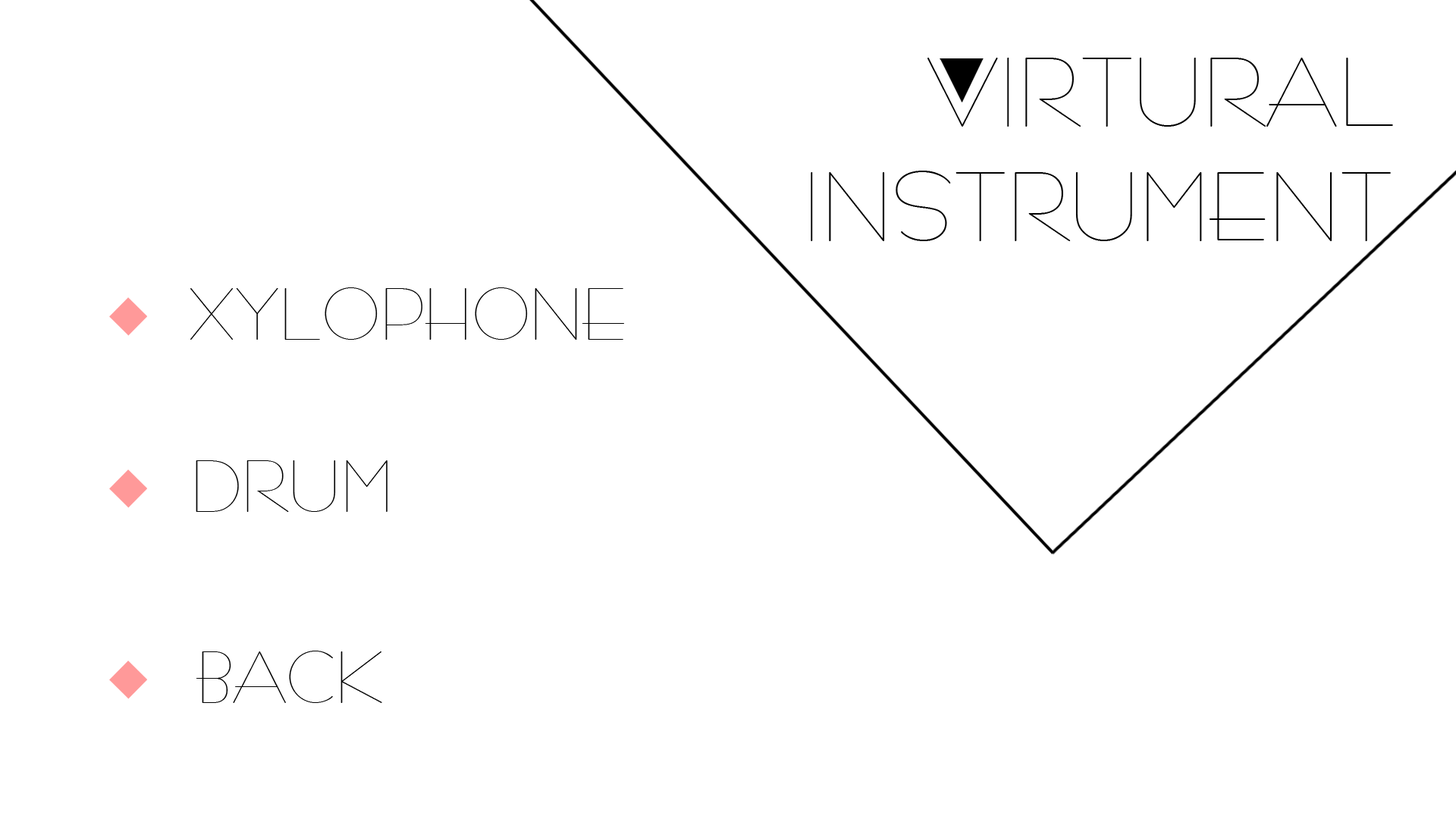
<style>
.page{position:relative;width:1456px;height:819px;background:#ffffff}
.page>*{position:absolute;margin:0}
.t1{font:75.8px "BernhardFashionBT-Regular";color:#000000}
.t2{font:56.9px "BernhardFashionBT-Regular";color:#000000}
</style>
<div class="page">
<p class="t1" style="left:927px;top:58px;width:466px;height:69px">VIRTURAL</p>
<p class="t1" style="left:811px;top:171px;width:580px;height:70px">INSTRUMENT</p>
<p class="t2" style="left:190px;top:287px;width:434px;height:53px">XYLOPHONE</p>
<p class="t2" style="left:196px;top:460px;width:192px;height:52px">DRUM</p>
<p class="t2" style="left:196px;top:651px;width:186px;height:52px">BACK</p>
</div>
